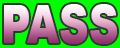
<style>
.page{position:relative;width:120px;height:48px;background:#00ff00}
.page>*{position:absolute;margin:0}
.t1{font:52.9px "Arial-Black";scale:0.78 1}
</style>
<div class="page">
<p class="t1" style="left:4px;top:4px;width:113px;height:40px">PASS</p>
</div>
